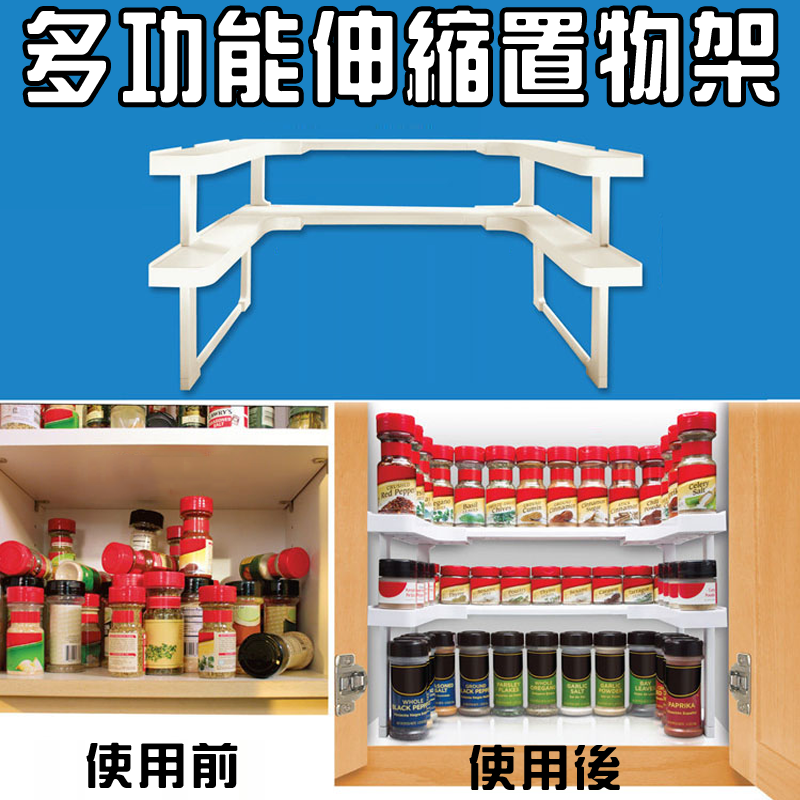
<style>
.page{position:relative;width:800px;height:800px;background:#1c83c6}
.page>*{position:absolute;margin:0}
.t1{font:97.5px "HanWangZonYi";letter-spacing:0.1em;color:#ffffff;scale:0.89 1}
.t2{font:48px "HanWangZonYi";letter-spacing:0.1em;color:#000000}
</style>
<div class="page">
<p class="t1" style="left:27px;top:10px;width:748px;height:93px">多功能伸縮置物架</p>
<p class="t2" style="left:86px;top:742px;width:152px;height:46px">使用前</p>
<p class="t2" style="left:469px;top:744px;width:151px;height:46px">使用後</p>
</div>
